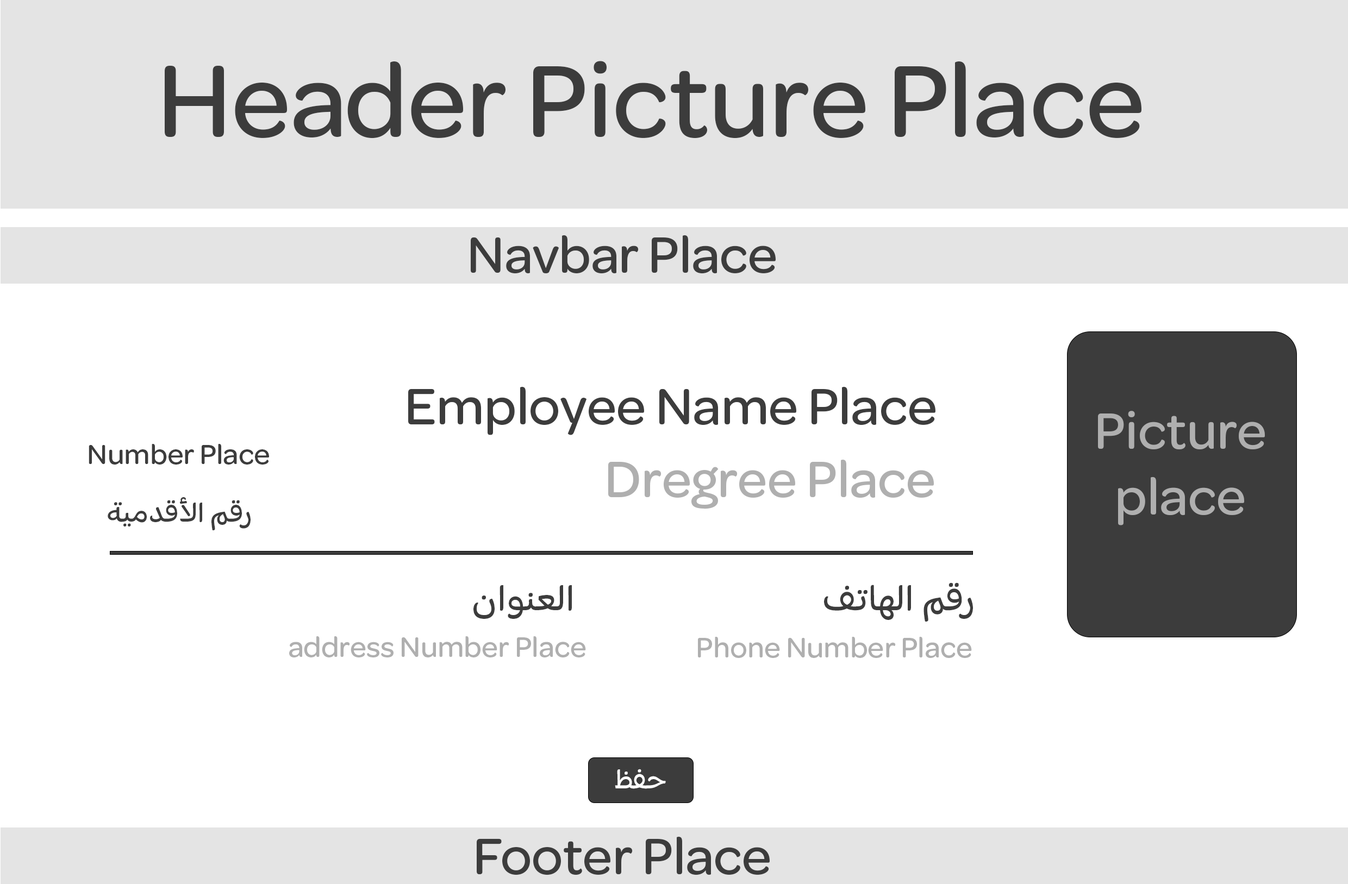
<style>
.page{position:relative;width:1348px;height:884px;background:#ffffff}
.page>*{position:absolute;margin:0}
.t1{font:108.7px "OmnesArabicMedium";color:#3c3c3c}
.t2{font:54.7px "OmnesArabicMedium";color:#3c3c3c}
.t3{font:54.7px "OmnesArabicMedium";color:#afafaf}
.t4{font:29.7px "OmnesArabicMedium";color:#3c3c3c}
.t5{font:38px "OmnesArabicMedium";color:#3c3c3c}
.t6{font:30.4px "OmnesArabicMedium";color:#afafaf}
.t7{font:29.7px "OmnesArabicMedium";color:#ffffff}
</style>
<div class="page">
<p class="t1" style="left:165px;top:61px;width:977px;height:78px">Header Picture Place</p>
<p class="t2" style="left:471px;top:235px;width:305px;height:39px">Navbar Place</p>
<p class="t2" style="left:408px;top:387px;width:528px;height:48px">Employee Name Place</p>
<p class="t3" style="left:1098px;top:411px;width:167px;height:115px;text-align:center">Picture<br>place</p>
<p class="t4" style="left:89px;top:444px;width:180px;height:21px">Number Place</p>
<p class="t3" style="left:608px;top:460px;width:326px;height:49px">Dregree Place</p>
<p class="t4" style="left:108px;top:497px;width:143px;height:34px">رقم الأقدمية</p>
<p class="t5" style="left:473px;top:585px;width:99px;height:34px">العنوان</p>
<p class="t5" style="left:824px;top:583px;width:149px;height:39px">رقم الهاتف</p>
<p class="t6" style="left:289px;top:637px;width:297px;height:21px">address Number Place</p>
<p class="t6" style="left:698px;top:637px;width:274px;height:21px">Phone Number Place</p>
<p class="t7" style="left:615px;top:769px;width:51px;height:20px">حفظ</p>
<p class="t2" style="left:477px;top:837px;width:293px;height:39px">Footer Place</p>
</div>
